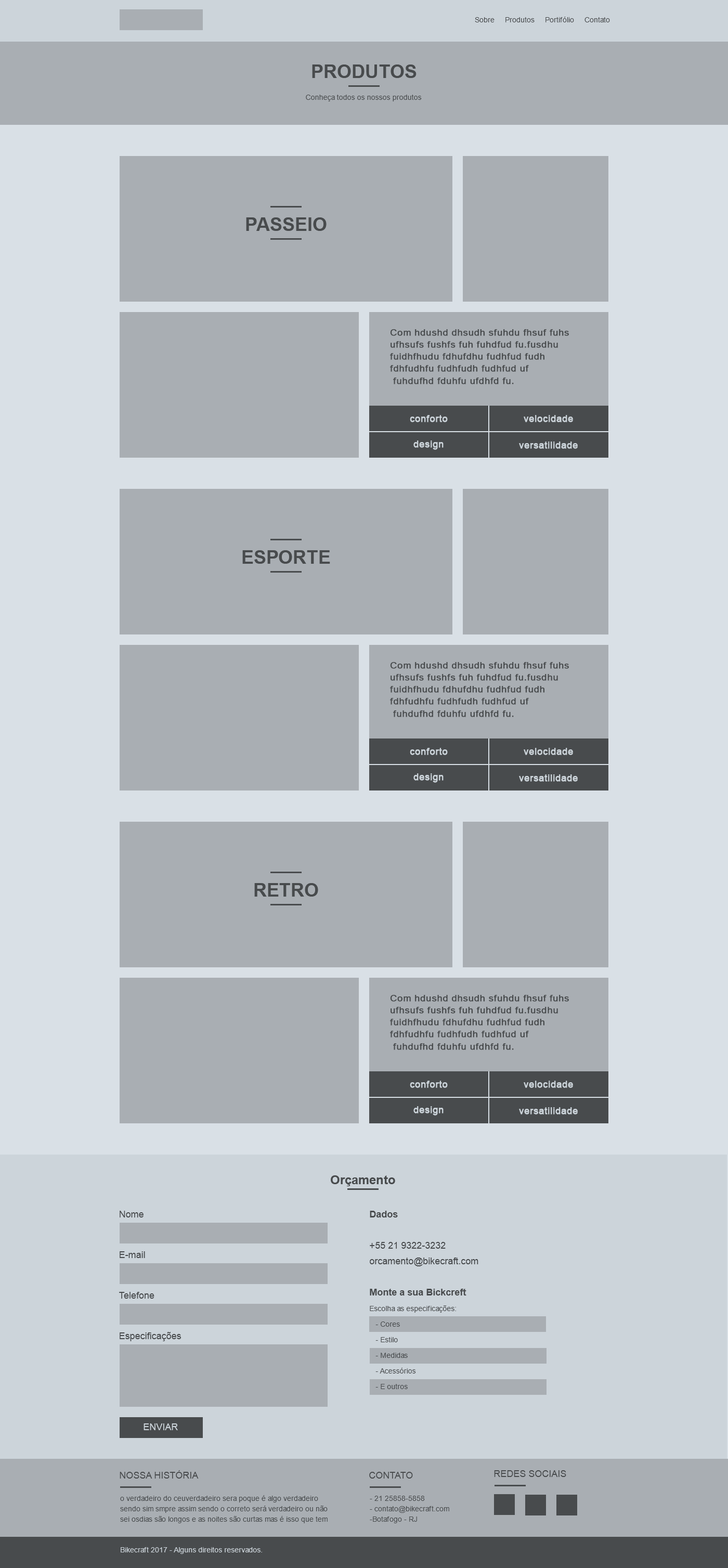
<style>
.page{position:relative;width:728px;height:1568px;background:#a9aeb3}
.page>*{position:absolute;margin:0}
.t1{font:7.3px "ArialMT";color:#484b4d}
.t2{font:18.7px "Arial-BoldMT";color:#484b4d;text-transform:uppercase}
.t3{font:8.7px/12.1px "ArialMT";color:#484b4d;font-weight:bold;scale:1.08 1}
.t4{font:9.4px "ArialMT";color:#ccd4da;font-weight:bold}
.t5{font:12.5px "Arial-BoldMT";color:#484b4d}
.t6{font:9.4px "ArialMT";color:#484b4d}
.t7{font:7.3px/15.6px "ArialMT";color:#484b4d}
.t8{font:9.4px/15.6px "Arial-BoldMT";color:#484b4d}
.t9{font:9.4px/15.6px "ArialMT";color:#484b4d}
.t10{font:9.4px "ArialMT";color:#ccd4da}
.t11{font:9.4px "ArialMT";color:#484b4d;text-transform:uppercase}
.t12{font:7.3px/10.4px "ArialMT";color:#484b4d}
.t13{font:7.3px "ArialMT";color:#ccd4da}
</style>
<div class="page">
<p class="t1" style="left:475px;top:17px;width:135px;height:5px">Sobre     Produtos     Portifólio     Contato</p>
<p class="t2" style="left:312px;top:64px;width:105px;height:14px">PRODUTOS</p>
<p class="t1" style="left:306px;top:95px;width:116px;height:6px">Conheça todos os nossos produtos</p>
<p class="t2" style="left:246px;top:217px;width:81px;height:14px">PASSEIO</p>
<p class="t3" style="left:390px;top:329px;width:179px;height:55px">Com hdushd dhsudh sfuhdu fhsuf fuhs ufhsufs fushfs fuh fuhdfud fu.fusdhu fuidhfhudu fdhufdhu fudhfud fudh fdhfudhfu fudhfudh fudhfud uf<br> fuhdufhd fduhfu ufdhfd fu.</p>
<p class="t4" style="left:410px;top:415px;width:38px;height:7px">conforto</p>
<p class="t4" style="left:524px;top:415px;width:49px;height:7px">velocidade</p>
<p class="t4" style="left:413px;top:440px;width:31px;height:10px">design</p>
<p class="t4" style="left:519px;top:442px;width:59px;height:7px">versatilidade</p>
<p class="t2" style="left:242px;top:550px;width:88px;height:14px">ESPORTE</p>
<p class="t3" style="left:390px;top:662px;width:179px;height:55px">Com hdushd dhsudh sfuhdu fhsuf fuhs ufhsufs fushfs fuh fuhdfud fu.fusdhu fuidhfhudu fdhufdhu fudhfud fudh fdhfudhfu fudhfudh fudhfud uf<br> fuhdufhd fduhfu ufdhfd fu.</p>
<p class="t4" style="left:410px;top:748px;width:38px;height:7px">conforto</p>
<p class="t4" style="left:524px;top:748px;width:49px;height:7px">velocidade</p>
<p class="t4" style="left:413px;top:773px;width:31px;height:10px">design</p>
<p class="t4" style="left:519px;top:774px;width:59px;height:8px">versatilidade</p>
<p class="t2" style="left:254px;top:883px;width:64px;height:14px">retro</p>
<p class="t3" style="left:390px;top:995px;width:179px;height:55px">Com hdushd dhsudh sfuhdu fhsuf fuhs ufhsufs fushfs fuh fuhdfud fu.fusdhu fuidhfhudu fdhufdhu fudhfud fudh fdhfudhfu fudhfudh fudhfud uf<br> fuhdufhd fduhfu ufdhfd fu.</p>
<p class="t4" style="left:410px;top:1081px;width:38px;height:7px">conforto</p>
<p class="t4" style="left:524px;top:1081px;width:49px;height:7px">velocidade</p>
<p class="t4" style="left:413px;top:1106px;width:31px;height:10px">design</p>
<p class="t4" style="left:519px;top:1107px;width:59px;height:8px">versatilidade</p>
<p class="t5" style="left:331px;top:1175px;width:64px;height:11px">Orçamento</p>
<p class="t6" style="left:120px;top:1211px;width:24px;height:6px">Nome</p>
<p class="t7" style="left:370px;top:1211px;width:108px;height:178px"><span class="t8">Dados <br></span><span class="t9"><br>+55 21 9322-3232<br>orcamento@bikecraft.com<br><br></span><span class="t8">Monte a sua Bickcreft<br></span>Escolha as especificações:<br>   - Cores<br>   - Estilo<br>   - Medidas<br>   - Acessórios<br>   - E outros</p>
<p class="t6" style="left:120px;top:1251px;width:25px;height:7px">E-mail</p>
<p class="t6" style="left:119px;top:1292px;width:35px;height:7px">Telefone</p>
<p class="t6" style="left:120px;top:1332px;width:61px;height:9px">Especificações</p>
<p class="t10" style="left:144px;top:1423px;width:34px;height:7px">ENVIAR</p>
<p class="t11" style="left:120px;top:1470px;width:79px;height:9px">Nossa História</p>
<p class="t11" style="left:369px;top:1472px;width:44px;height:7px">CONTATO</p>
<p class="t11" style="left:494px;top:1470px;width:72px;height:7px">REDES SOCIAIS</p>
<p class="t12" style="left:120px;top:1495px;width:208px;height:28px">o verdadeiro do ceuverdadeiro sera poque é algo verdadeiro sendo sim smpre assim sendo o correto será verdadeiro ou não sei osdias são longos e as noites são curtas mas é isso que tem</p>
<p class="t12" style="left:370px;top:1496px;width:79px;height:27px">- 21 25858-5858<br>- contato@bikecraft.com<br>-Botafogo - RJ</p>
<p class="t13" style="left:121px;top:1547px;width:141px;height:7px">Bikecraft 2017 - Alguns direitos reservados.</p>
</div>
